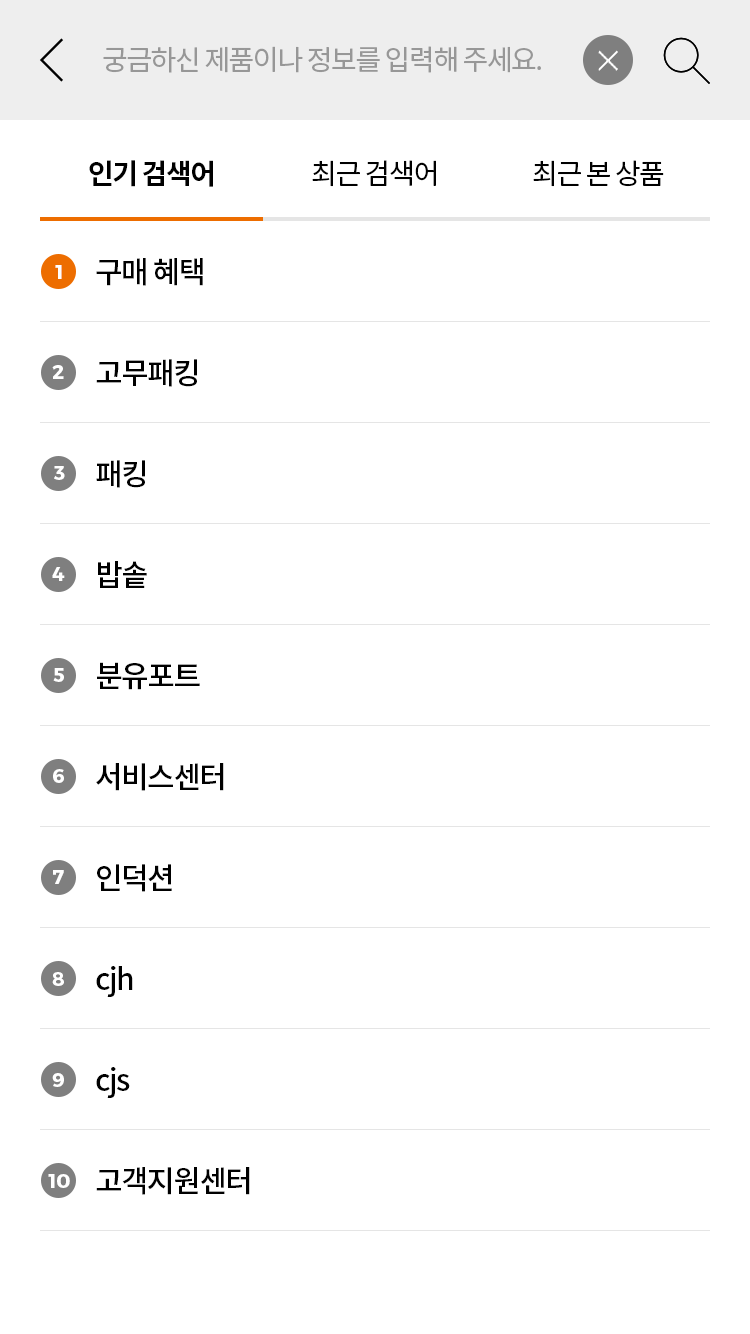
<style>
.page{position:relative;width:750px;height:1334px;background:#ffffff}
.page>*{position:absolute;margin:0}
.t1{font:28px "NotoSansCJKkr-Regular";letter-spacing:-0.05em;color:#979797}
.t2{font:28px "NotoSansCJKkr-Bold";letter-spacing:-0.05em;color:#000000}
.t3{font:28px "NotoSansCJKkr-Regular";letter-spacing:-0.05em;color:#000000}
.t4{font:20px "Montserrat-Bold";color:#ffffff}
.t5{font:30px "NotoSansCJKkr-Medium";letter-spacing:-0.05em;color:#000000}
</style>
<div class="page">
<p class="t1" style="left:103px;top:46px;width:438px;height:27px">궁금하신 제품이나 정보를 입력해 주세요.</p>
<p class="t2" style="left:89px;top:160px;width:124px;height:27px">인기 검색어</p>
<p class="t3" style="left:312px;top:160px;width:124px;height:27px">최근 검색어</p>
<p class="t3" style="left:533px;top:160px;width:131px;height:27px">최근 본 상품</p>
<p class="t4" style="left:55px;top:265px;width:7px;height:14px">1</p>
<p class="t5" style="left:96px;top:258px;width:107px;height:28px">구매 혜택</p>
<p class="t4" style="left:52px;top:365px;width:12px;height:14px">2</p>
<p class="t5" style="left:96px;top:359px;width:101px;height:28px">고무패킹</p>
<p class="t5" style="left:96px;top:460px;width:49px;height:28px">패킹</p>
<p class="t4" style="left:54px;top:466px;width:11px;height:14px">3</p>
<p class="t4" style="left:52px;top:567px;width:13px;height:14px">4</p>
<p class="t5" style="left:98px;top:561px;width:49px;height:27px">밥솥</p>
<p class="t5" style="left:97px;top:662px;width:103px;height:28px">분유포트</p>
<p class="t4" style="left:53px;top:668px;width:11px;height:14px">5</p>
<p class="t4" style="left:53px;top:769px;width:11px;height:14px">6</p>
<p class="t5" style="left:96px;top:763px;width:128px;height:28px">서비스센터</p>
<p class="t4" style="left:53px;top:870px;width:11px;height:14px">7</p>
<p class="t5" style="left:97px;top:864px;width:75px;height:28px">인덕션</p>
<p class="t5" style="left:96px;top:966px;width:37px;height:31px">cjh</p>
<p class="t4" style="left:52px;top:972px;width:12px;height:14px">8</p>
<p class="t4" style="left:52px;top:1073px;width:12px;height:14px">9</p>
<p class="t5" style="left:96px;top:1067px;width:34px;height:31px">cjs</p>
<p class="t5" style="left:96px;top:1167px;width:154px;height:28px">고객지원센터</p>
<p class="t4" style="left:48px;top:1174px;width:22px;height:14px">10</p>
</div>
